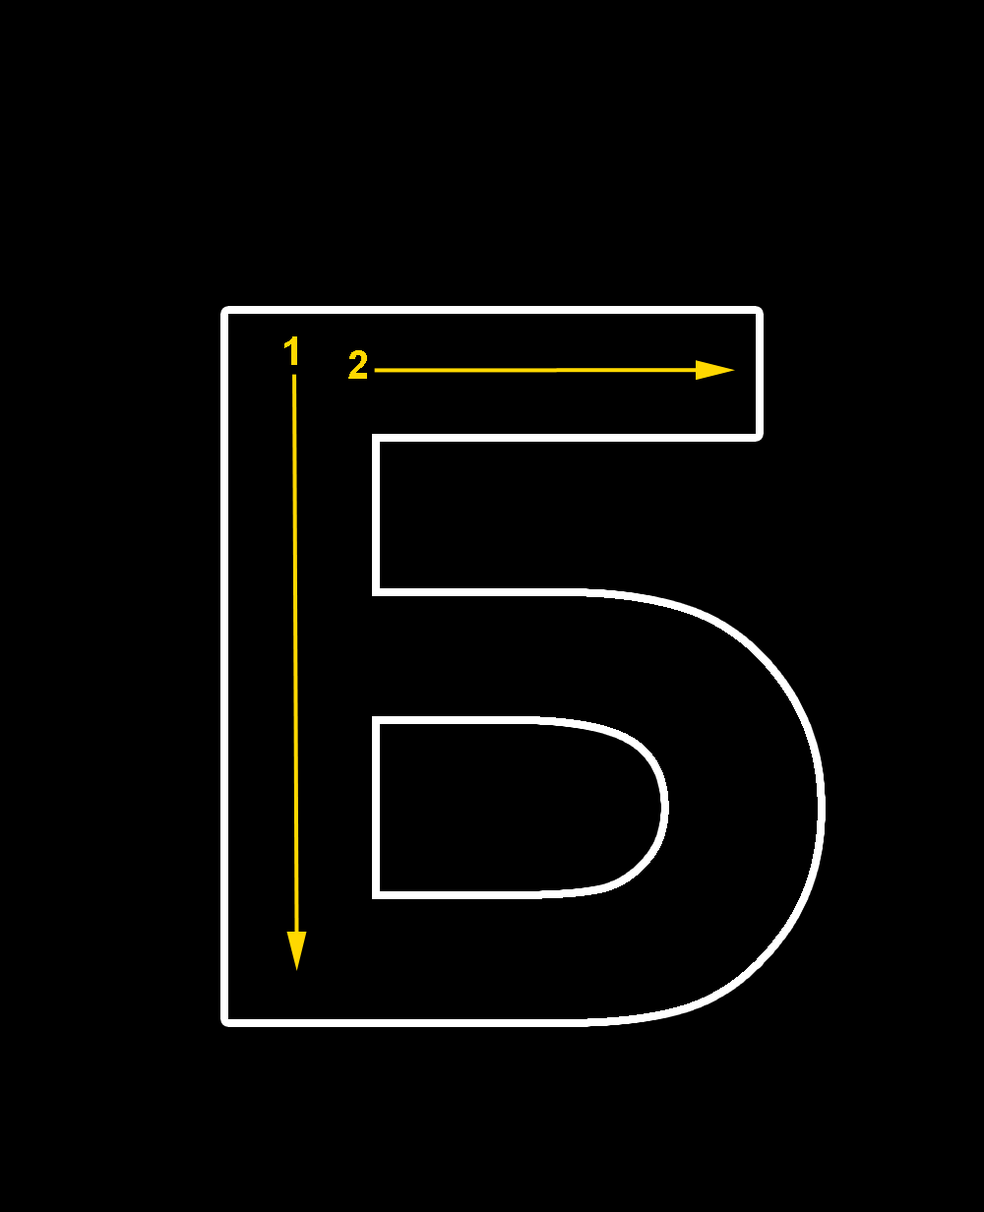
<style>
.page{position:relative;width:984px;height:1212px;background:#000000}
.page>*{position:absolute;margin:0}
.t1{font:39.4px "Arial-BoldMT";color:#ffd800}
</style>
<div class="page">
<p class="t1" style="left:284px;top:336px;width:13px;height:29px">1</p>
<p class="t1" style="left:348px;top:350px;width:19px;height:29px">2</p>
</div>
